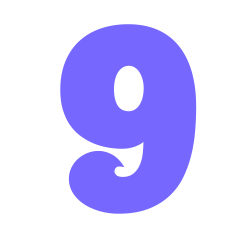
<style>
.page{position:relative;width:236px;height:236px;background:#ffffff}
.page>*{position:absolute;margin:0}
.t1{font:250px "SpicyRice-Regular";color:#7668ff}
</style>
<div class="page">
<p class="t1" style="left:60px;top:24px;width:137px;height:190px">9</p>
</div>
